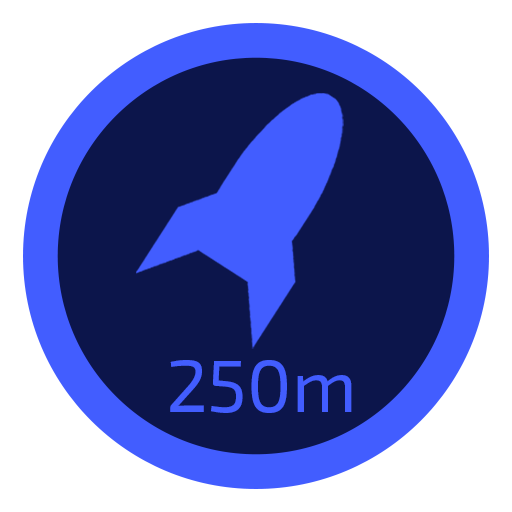
<style>
.page{position:relative;width:512px;height:512px;background:#0c154b}
.page>*{position:absolute;margin:0}
.t1{font:74.2px "Exo2-Regular";color:#425dff}
</style>
<div class="page">
<p class="t1" style="left:170px;top:360px;width:182px;height:53px">250m</p>
</div>
